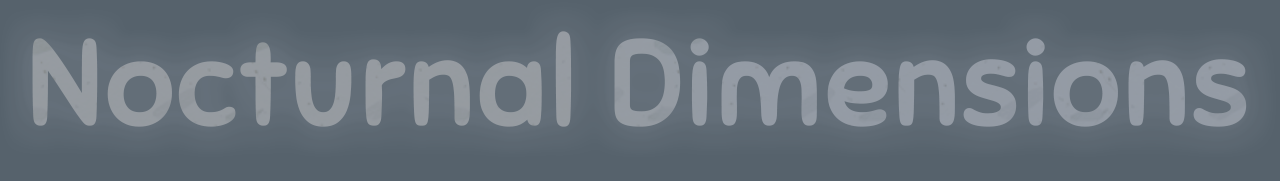
<style>
.page{position:relative;width:1280px;height:181px;background:#56626c}
.page>*{position:absolute;margin:0}
.t1{font:120px "Sniglet-Regular";color:#949ba1;font-weight:bold}
</style>
<div class="page">
<p class="t1" style="left:32px;top:31px;width:1215px;height:96px">Nocturnal Dimensions</p>
</div>
